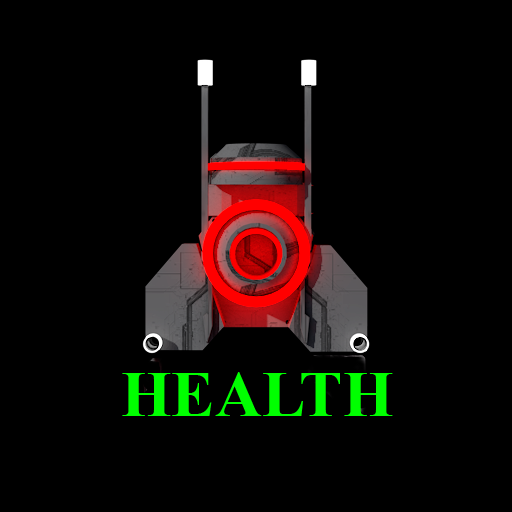
<style>
.page{position:relative;width:512px;height:512px;background:#000000}
.page>*{position:absolute;margin:0}
.t1{font:65px "TimesNewRomanPS-BoldMT";color:#00ff00}
</style>
<div class="page">
<p class="t1" style="left:122px;top:372px;width:271px;height:44px">HEALTH</p>
</div>
